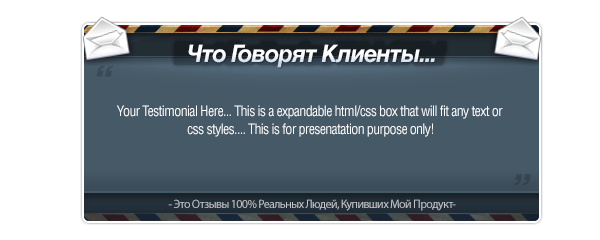
<style>
.page{position:relative;width:600px;height:240px;background:#ffffff}
.page>*{position:absolute;margin:0}
.t1{font:24px "HelveticaCyr-BoldInclined";letter-spacing:-0.05em;color:#ffffff}
.t2{font:14px/18px "Helvetica-Condensed";letter-spacing:-0.05em;color:#ffffff}
.t3{font:12px "MyriadPro-Regular";letter-spacing:-0.05em;color:#c2c4c6}
</style>
<div class="page">
<p class="t1" style="left:188px;top:44px;width:247px;height:24px">Что Говорят Клиенты...</p>
<p class="t2" style="left:116px;top:105px;width:387px;height:32px;text-align:center">Your Testimonial Here... This is a expandable html/css box that will fit any text or <br>css styles.... This is for presenatation purpose only!</p>
<p class="t3" style="left:168px;top:199px;width:288px;height:12px">- Это Отзывы 100% Реальных Людей, Купивших Мой Продукт-</p>
</div>
